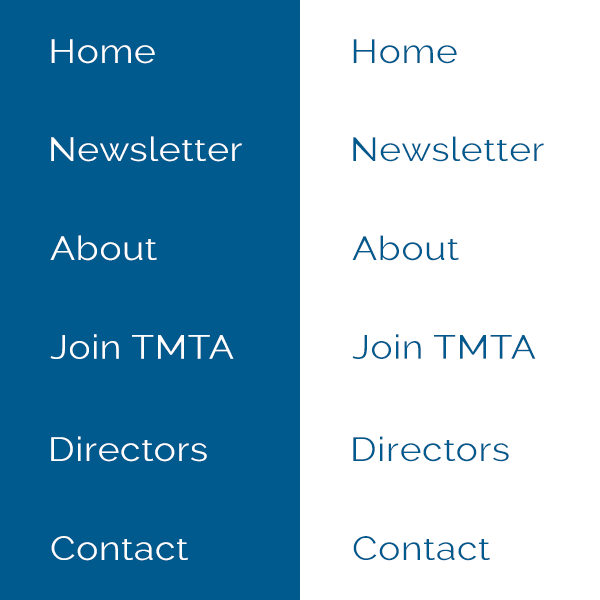
<style>
.page{position:relative;width:600px;height:600px;background:#ffffff}
.page>*{position:absolute;margin:0}
.t1{font:33.3px "Raleway";letter-spacing:0.02em;color:#ffffff;scale:1.11 1}
.t2{font:33.3px "Raleway";letter-spacing:0.02em;color:#015a8d;scale:1.11 1}
</style>
<div class="page">
<p class="t1" style="left:51px;top:39px;width:104px;height:25px">Homevv</p>
<p class="t2" style="left:353px;top:39px;width:104px;height:25px">Homevv</p>
<p class="t1" style="left:51px;top:136px;width:191px;height:26px">Newsletter</p>
<p class="t2" style="left:353px;top:136px;width:191px;height:26px">Newsletter</p>
<p class="t1" style="left:50px;top:235px;width:107px;height:26px">About</p>
<p class="t2" style="left:352px;top:235px;width:107px;height:26px">About</p>
<p class="t1" style="left:50px;top:334px;width:184px;height:25px">Join TMTA</p>
<p class="t2" style="left:352px;top:334px;width:184px;height:25px">Join TMTA</p>
<p class="t1" style="left:51px;top:436px;width:156px;height:26px">Directors</p>
<p class="t2" style="left:353px;top:436px;width:156px;height:26px">Directors</p>
<p class="t1" style="left:51px;top:536px;width:137px;height:25px">Contact</p>
<p class="t2" style="left:353px;top:536px;width:137px;height:25px">Contact</p>
</div>
